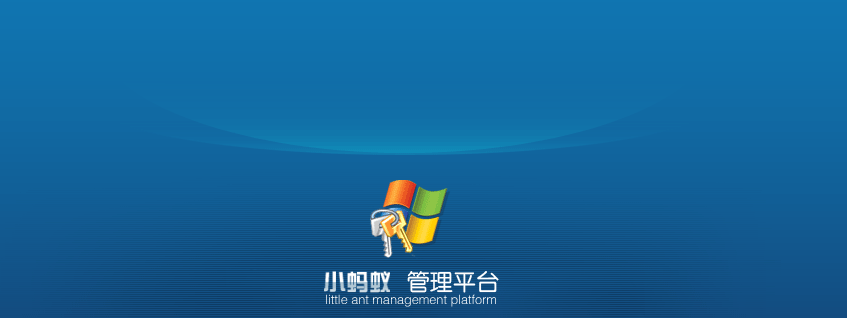
<style>
.page{position:relative;width:847px;height:318px}
.page>*{position:absolute;margin:0}
.t1{font:23.1px "FZY3JW--GB1-0";color:#ffffff}
.t2{font:12.7px "FZZDXJW--GB1-0";color:#ffffff}
</style>
<div class="page">
<p class="t1" style="left:407px;top:271px;width:92px;height:22px">管理平台</p>
<p class="t2" style="left:326px;top:294px;width:170px;height:13px">little ant management platform</p>
</div>
